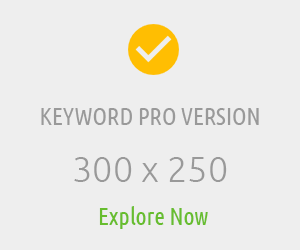
<style>
.page{position:relative;width:300px;height:250px;background:#eeeeee}
.page>*{position:absolute;margin:0}
.t1{font:24px "UbuntuCondensed-Regular";color:#999999}
.t2{font:36px "Ubuntu-Light";color:#999999}
.t3{font:24px "UbuntuCondensed-Regular";color:#67bd2e}
</style>
<div class="page">
<p class="t1" style="left:41px;top:108px;width:218px;height:17px">KEYWORD PRO VERSION</p>
<p class="t2" style="left:74px;top:157px;width:153px;height:25px">300 x 250</p>
<p class="t3" style="left:99px;top:206px;width:109px;height:23px">Explore Now</p>
</div>
